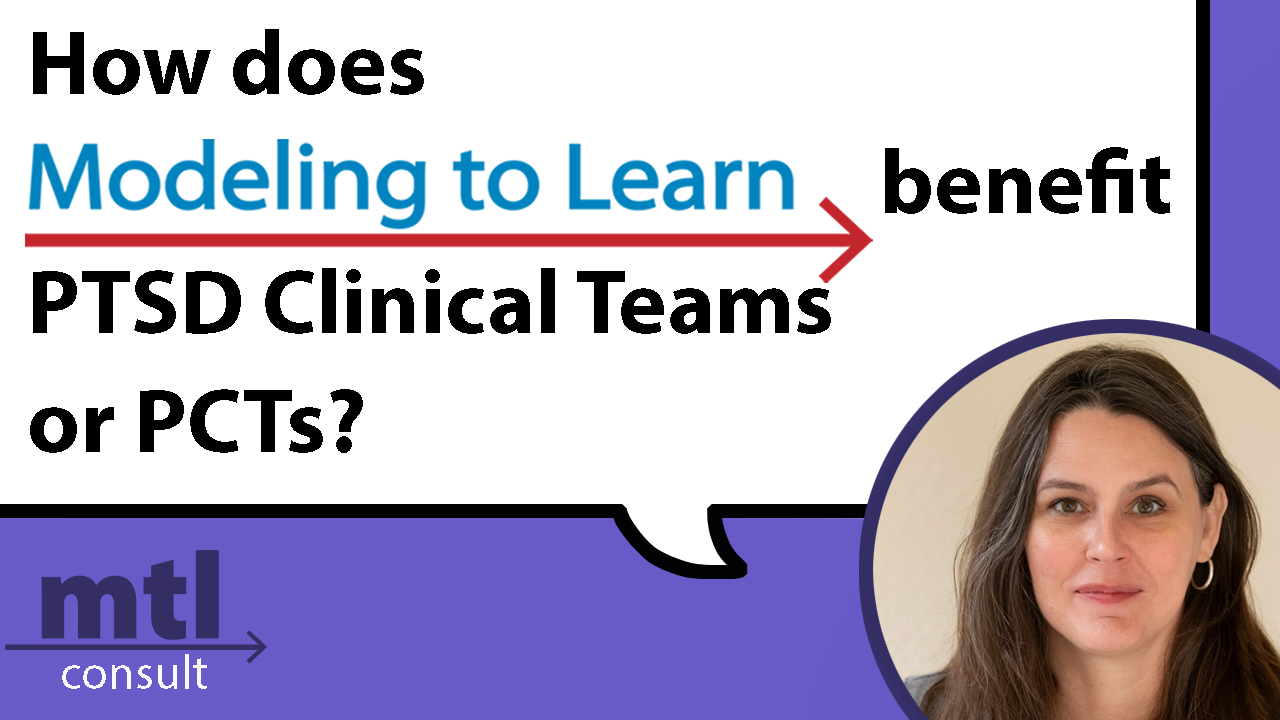
<style>
.page{position:relative;width:1280px;height:720px;background:#ffffff}
.page>*{position:absolute;margin:0}
.t1{font:91.7px/108.3px "MyriadPro-Bold";color:#000000}
</style>
<div class="page">
<p class="t1" style="left:30px;top:29px;width:1140px;height:424px">How does<br>                                              benefit <br>PTSD Clinical Teams<br>or PCTs?</p>
</div>
